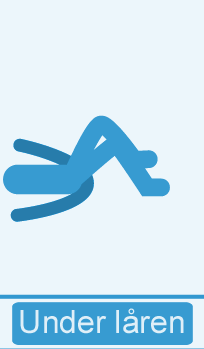
<style>
.page{position:relative;width:204px;height:349px;background:#ecf6fb}
.page>*{position:absolute;margin:0}
.t1{font:32px "ArialMT";color:#dfeff8}
</style>
<div class="page">
<p class="t1" style="left:20px;top:308px;width:164px;height:26px">Under låren</p>
</div>
